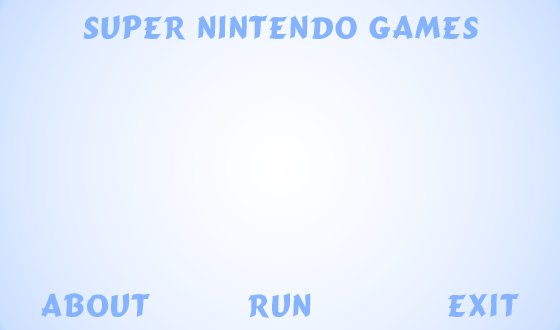
<style>
.page{position:relative;width:560px;height:330px}
.page>*{position:absolute;margin:0}
.t1{font:30px "Cartoon-Bold";color:#85b3ff}
</style>
<div class="page">
<p class="t1" style="left:83px;top:15px;width:395px;height:25px">Super Nintendo Games</p>
<p class="t1" style="left:41px;top:293px;width:478px;height:25px">About          Run              Exit</p>
</div>
